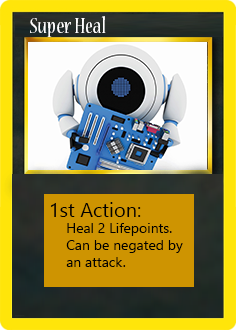
<style>
.page{position:relative;width:236px;height:330px}
.page>*{position:absolute;margin:0}
.t1{font:24px "NuevaStd-Cond";color:#ffffff}
.t2{font:20px "LeelawadeeUI";color:#000000}
.t3{font:14px "LeelawadeeUI";color:#000000}
</style>
<div class="page">
<p class="t1" style="left:30px;top:16px;width:76px;height:21px">Super Heal</p>
<p class="t2" style="left:50px;top:202px;width:91px;height:15px">1st Action:</p>
<p class="t3" style="left:66px;top:223px;width:117px;height:44px">Heal 2 Lifepoints. <br>Can be negated by <br>an attack.</p>
</div>
